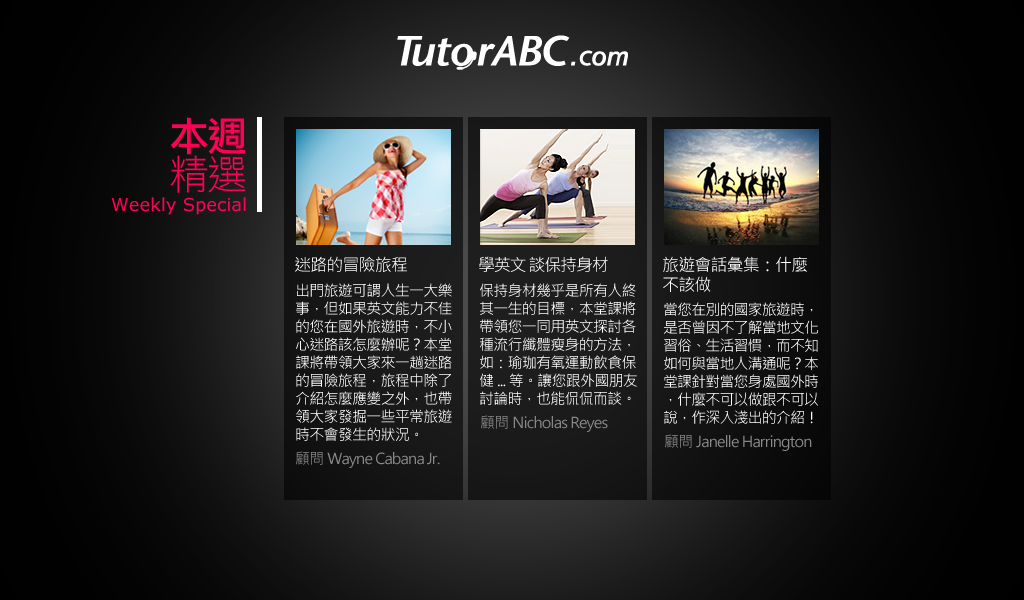
<style>
.page{position:relative;width:1024px;height:600px}
.page>*{position:absolute;margin:0}
.t1{font:40px/38px "DFLiHei-Md-WIN-BF";letter-spacing:-0.05em;color:#ff0054}
.t2{font:40px/38px "DFLiHei-Lt-WIN-BF";letter-spacing:-0.05em;color:#ff0054}
.t3{font:18px "Verdana";color:#ff0054}
.t4{font:17px "MicrosoftJhengHeiRegular";letter-spacing:-0.05em;color:#ffffff}
.t5{font:17px "MicrosoftJhengHeiRegular";letter-spacing:-0.07em;color:#ffffff}
.t6{font:17px/20px "MicrosoftJhengHeiRegular";letter-spacing:-0.05em;color:#ffffff}
.t7{font:15px/18px "MicrosoftJhengHeiRegular";letter-spacing:-0.05em;color:#ffffff}
.t8{font:15px/18px "MicrosoftJhengHeiRegular";letter-spacing:-0.06em;color:#ffffff}
.t9{font:15px "MicrosoftJhengHeiRegular";letter-spacing:-0.05em;color:#888888}
</style>
<div class="page">
<p class="t1" style="left:170px;top:117px;width:76px;height:76px;text-align:right">本週<br><span class="t2">精選</span></p>
<p class="t3" style="left:111px;top:197px;width:135px;height:18px">Weekly Special</p>
<p class="t4" style="left:295px;top:256px;width:112px;height:16px">迷路的冒險旅程</p>
<p class="t5" style="left:479px;top:256px;width:129px;height:16px">學英文 談保持身材</p>
<p class="t6" style="left:663px;top:256px;width:144px;height:36px">旅遊會話彙集：什麼<br>不該做</p>
<p class="t7" style="left:296px;top:283px;width:156px;height:158px">出門旅遊可謂人生一大樂<br>事，但如果英文能力不佳<br>的您在國外旅遊時，不小<br>心迷路該怎麼辦呢？本堂<br>課將帶領大家來一趟迷路<br>的冒險旅程，旅程中除了<br>介紹怎麼應變之外，也帶<br>領大家發掘一些平常旅遊<br>時不會發生的狀況。</p>
<p class="t7" style="left:480px;top:283px;width:157px;height:122px">保持身材幾乎是所有人終<br>其一生的目標，本堂課將<br>帶領您一同用英文探討各<br>種流行纖體瘦身的方法，<br>如：瑜珈有氧運動飲食保<br>健...等。讓您跟外國朋友<br>討論時，也能侃侃而談。</p>
<p class="t8" style="left:664px;top:302px;width:155px;height:122px">當您在別的國家旅遊時，<br>是否曾因不了解當地文化<br>習俗、生活習慣，而不知<br>如何與當地人溝通呢？本<br>堂課針對當您身處國外時<br>，什麼不可以做跟不可以<br>說，作深入淺出的介紹！</p>
<p class="t9" style="left:481px;top:415px;width:127px;height:17px">顧問Nicholas Reyes</p>
<p class="t9" style="left:665px;top:434px;width:147px;height:17px">顧問Janelle Harrington</p>
<p class="t9" style="left:296px;top:451px;width:144px;height:17px">顧問Wayne Cabana Jr.</p>
</div>
